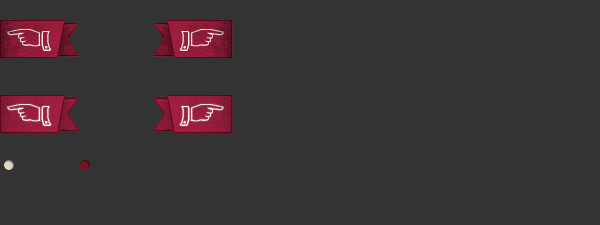
<style>
.page{position:relative;width:600px;height:225px;background:#333333}
.page>*{position:absolute;margin:0}
.t1{font:30px "BrothersWordLogos";color:#e2e2e2}
.t2{font:30px "BrothersWordLogos";color:#e4e5e5}
.t3{font:30px "BrothersWordLogos";color:#ffffff}
.t4{font:30px "ClarendonLTStd";color:#e3d8c3}
.t5{font:30px "ClarendonLTStd";color:#7d0f21}
</style>
<div class="page">
<p class="t1" style="left:7px;top:29px;width:45px;height:22px;rotate:180deg">‘</p>
<p class="t2" style="left:179px;top:29px;width:45px;height:22px">‘</p>
<p class="t3" style="left:7px;top:104px;width:45px;height:22px;rotate:180deg">‘</p>
<p class="t3" style="left:179px;top:104px;width:45px;height:22px">‘</p>
<p class="t4" style="left:4px;top:160px;width:10px;height:10px">•</p>
<p class="t5" style="left:80px;top:160px;width:10px;height:10px">•</p>
</div>
